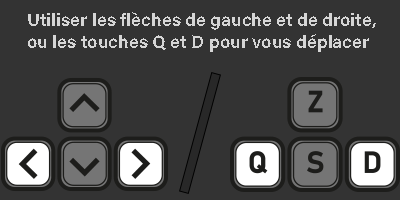
<style>
.page{position:relative;width:400px;height:200px;background:#333333}
.page>*{position:absolute;margin:0}
.t1{font:18px "AcuminConcept-Bold";color:#d6d6d6}
</style>
<div class="page">
<p class="t1" style="left:28px;top:12px;width:348px;height:40px">Utiliser les flèches de gauche et de droite, ou les touches Q et D pour vous déplacer</p>
</div>
